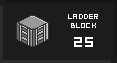
<style>
.page{position:relative;width:117px;height:63px;background:#1c1c1c}
.page>*{position:absolute;margin:0}
.t1{font:8px/9px "04b03b";letter-spacing:0.04em;color:#ffffff}
.t2{font:16px "04b03b";letter-spacing:0.04em;color:#ffffff}
</style>
<div class="page">
<p class="t1" style="left:68px;top:14px;width:30px;height:33px;text-align:center">LADDER<br>BLOCK<br><span class="t2">25</span></p>
</div>
